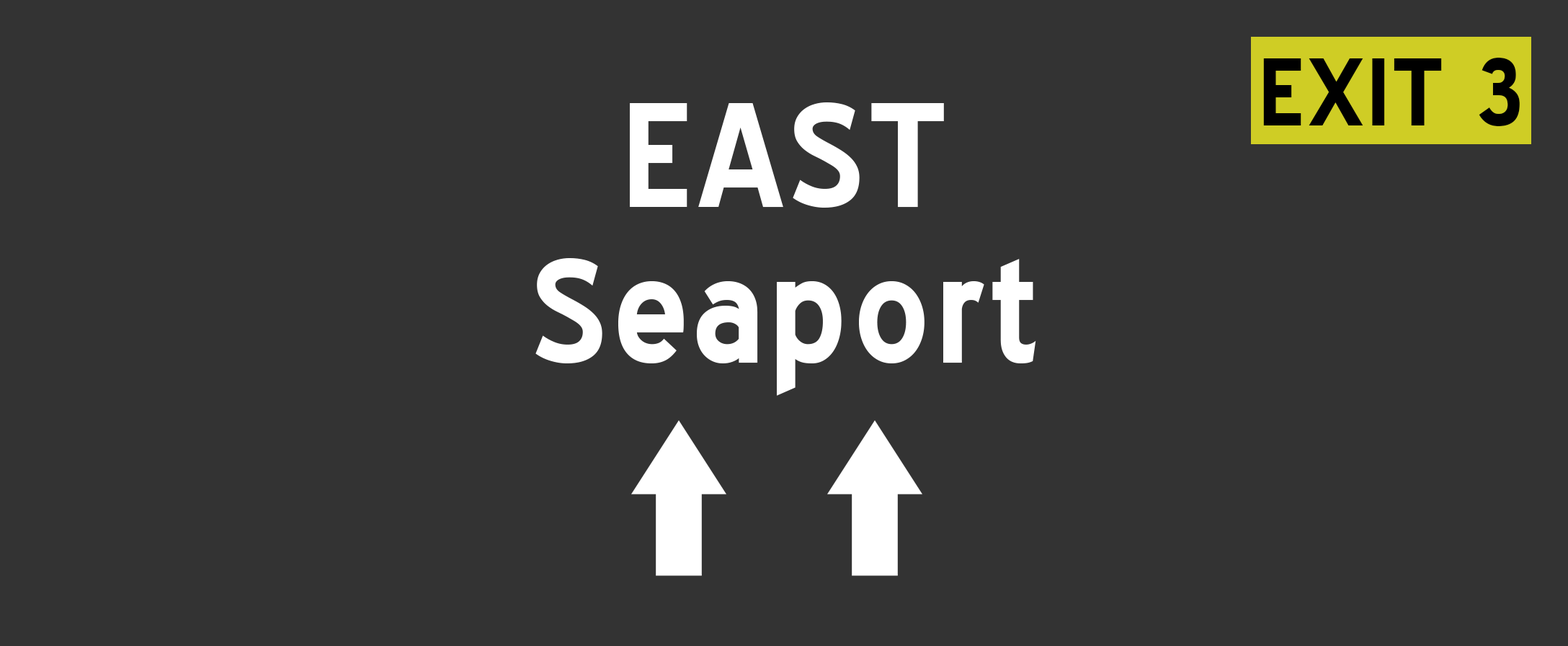
<style>
.page{position:relative;width:1568px;height:646px;background:#333333}
.page>*{position:absolute;margin:0}
.t1{font:93.7px "BlueHighway-Bold";letter-spacing:0.02em;color:#000000}
.t2{font:144.1px "BlueHighway-Bold";letter-spacing:0.02em;color:#ffffff}
</style>
<div class="page">
<p class="t1" style="left:1263px;top:58px;width:257px;height:68px">EXIT 3</p>
<p class="t2" style="left:630px;top:102px;width:314px;height:106px">EAST</p>
<p class="t2" style="left:535px;top:258px;width:501px;height:138px">Seaport</p>
</div>
